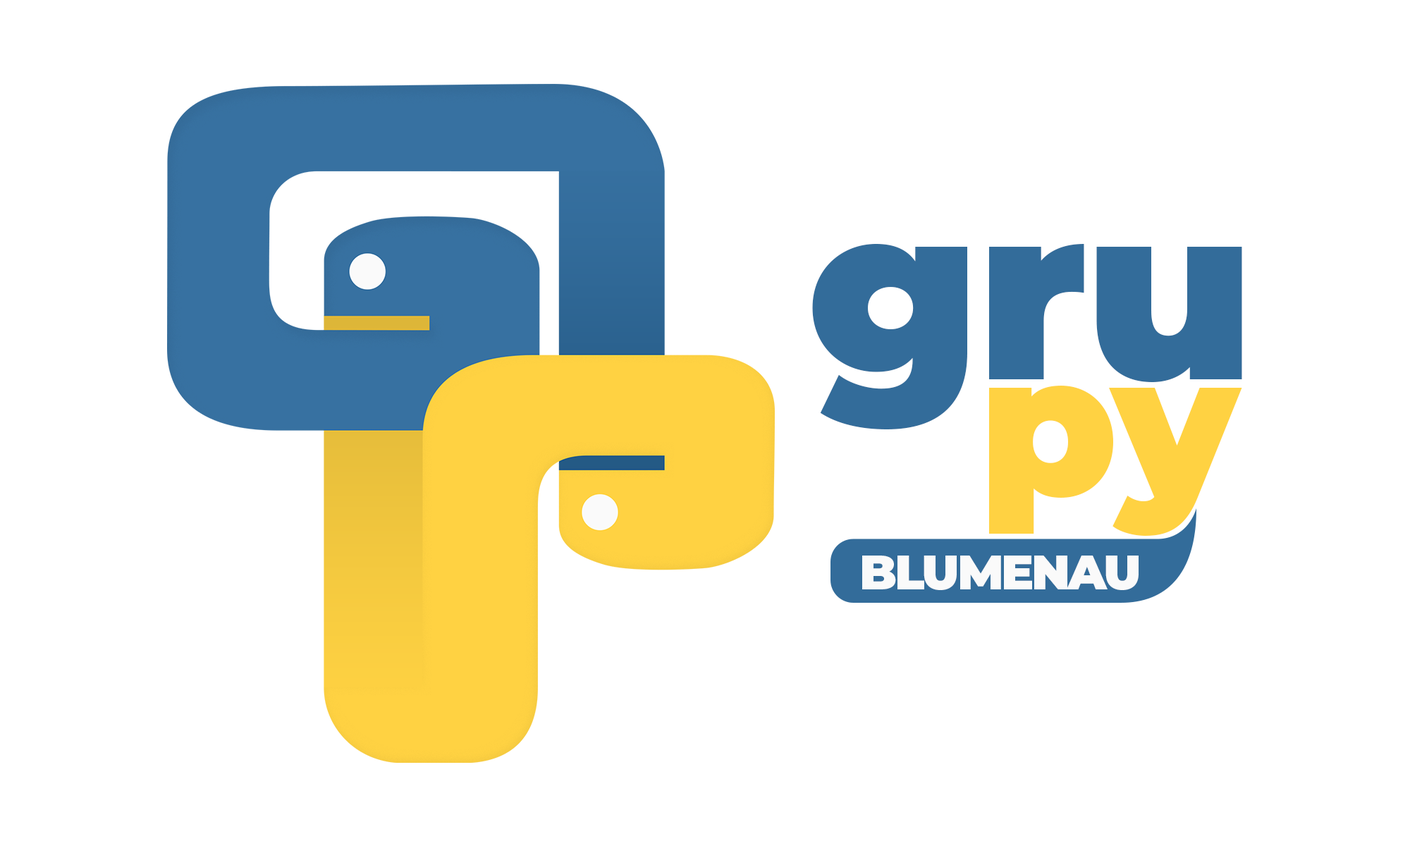
<style>
.page{position:relative;width:1410px;height:846px;background:#ffffff}
.page>*{position:absolute;margin:0}
.t1{font:242.2px "Montserrat-Black";letter-spacing:-0.01em;color:#336c9a}
.t2{font:197.4px "Montserrat-Black";letter-spacing:-0.01em;color:#ffd242}
.t3{font:48.4px "Montserrat-Black";letter-spacing:-0.05em;color:#fafafa}
</style>
<div class="page">
<p class="t1" style="left:812px;top:244px;width:430px;height:185px">gru</p>
<p class="t2" style="left:989px;top:386px;width:253px;height:150px">py</p>
<p class="t3" style="left:862px;top:555px;width:276px;height:35px">BLUMENAU</p>
</div>
